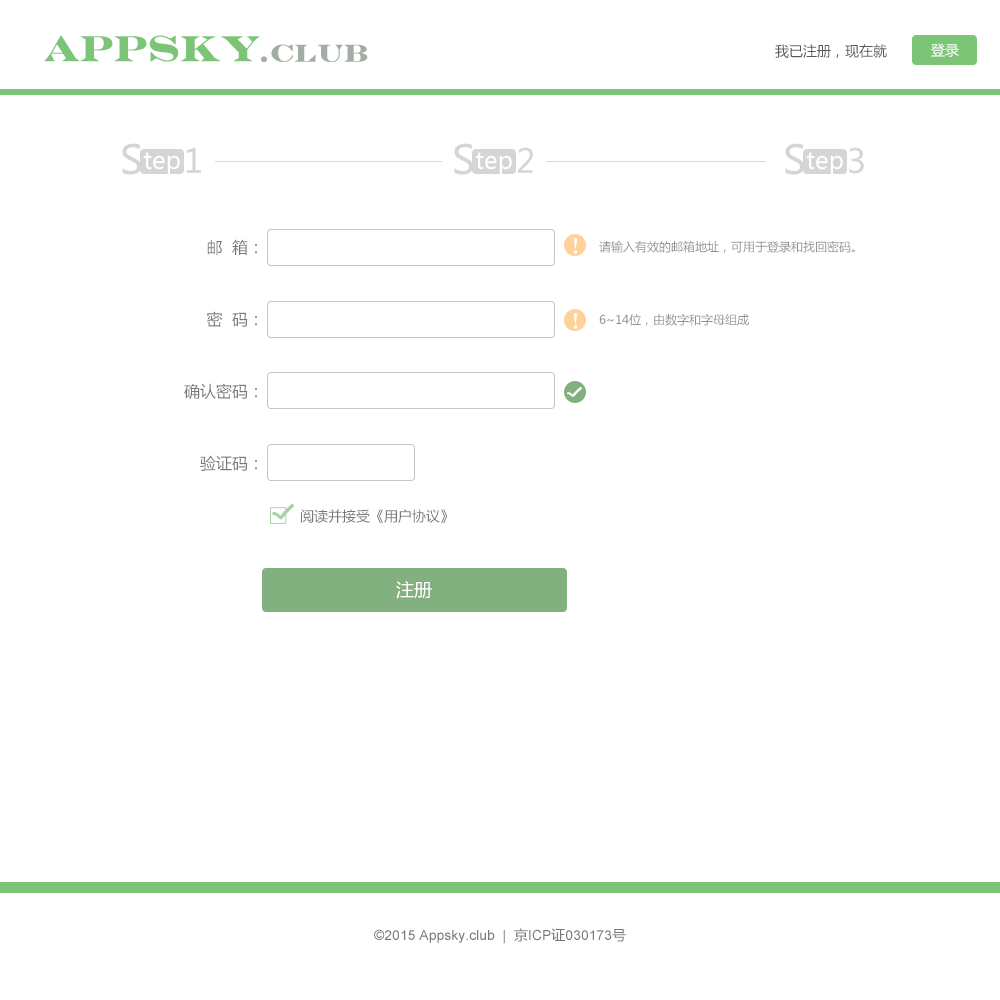
<style>
.page{position:relative;width:1000px;height:1000px;background:#ffffff}
.page>*{position:absolute;margin:0}
.t1{font:36px "EngraversMT-Bold";color:#7cc576;font-weight:bold}
.t2{font:24.4px "EngraversMT-Bold";color:#a4ada4;font-weight:bold}
.t3{font:14px "MicrosoftYaHei";color:#585958}
.t4{font:14px "MicrosoftYaHei";color:#ffffff}
.t5{font:39.5px "MicrosoftYaHei";color:#d5d5d5}
.t6{font:32.4px "MicrosoftYaHei";color:#d5d5d5}
.t7{font:24px "MicrosoftYaHei";color:#ffffff}
.t8{font:14px "MicrosoftYaHei";color:#7cc576}
.t9{font:16px/72px "MicrosoftYaHei";color:#787878}
.t10{font:18px "HYa9gj";color:#ffffff}
.t11{font:12px "MicrosoftYaHei";color:#919191}
.t12{font:14px "MicrosoftYaHei";color:#787878}
.t13{font:18px "MicrosoftYaHei";color:#ffffff}
.t14{font:14px "ArialMT";color:#797979}
.t15{font:14px "MicrosoftYaHei";color:#797979}
</style>
<div class="page">
<p class="t1" style="left:44px;top:35px;width:216px;height:27px">APPSky</p>
<p class="t2" style="left:261px;top:44px;width:107px;height:18px">.CLUB</p>
<p class="t3" style="left:775px;top:44px;width:112px;height:14px">我已注册，现在就</p>
<p class="t4" style="left:931px;top:43px;width:28px;height:14px">登录</p>
<p class="t5" style="left:122px;top:143px;width:19px;height:32px">S</p>
<p class="t6" style="left:186px;top:147px;width:15px;height:26px">1</p>
<p class="t5" style="left:454px;top:143px;width:19px;height:32px">S</p>
<p class="t6" style="left:517px;top:147px;width:16px;height:26px">2</p>
<p class="t5" style="left:785px;top:143px;width:19px;height:32px">S</p>
<p class="t6" style="left:849px;top:147px;width:15px;height:27px">3</p>
<p class="t7" style="left:143px;top:152px;width:37px;height:23px"><span class="t8"> </span>tep</p>
<p class="t7" style="left:475px;top:152px;width:37px;height:23px"><span class="t8"> </span>tep</p>
<p class="t7" style="left:806px;top:152px;width:37px;height:23px"><span class="t8"> </span>tep</p>
<p class="t9" style="left:184px;top:239px;width:73px;height:232px;text-align:right">邮  箱：<br>密  码：<br>确认密码：<br>验证码：</p>
<p class="t10" style="left:573px;top:238px;width:5px;height:16px">!</p>
<p class="t11" style="left:599px;top:241px;width:256px;height:12px">请输入有效的邮箱地址，可用于登录和找回密码。</p>
<p class="t10" style="left:573px;top:313px;width:5px;height:16px">!</p>
<p class="t11" style="left:599px;top:313px;width:150px;height:13px">6~14位，由数字和字母组成</p>
<p class="t12" style="left:301px;top:509px;width:147px;height:14px">阅读并接受《用户协议》</p>
<p class="t13" style="left:396px;top:581px;width:36px;height:18px">注册</p>
<p class="t14" style="left:374px;top:928px;width:252px;height:16px">©2015 Appsky.club  |  <span class="t15">京</span>ICP<span class="t15">证</span>030173<span class="t15">号</span></p>
</div>
